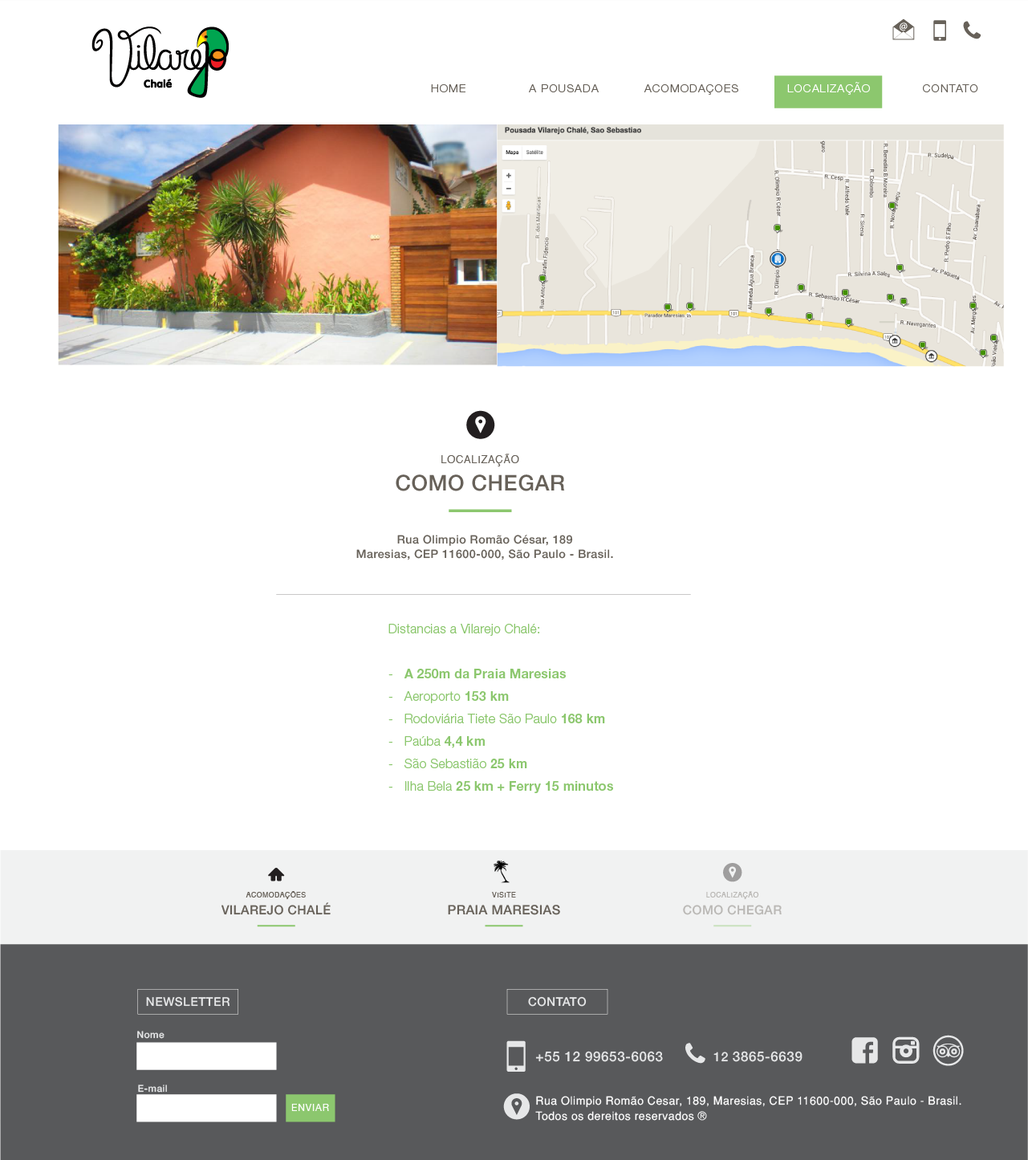
<style>
.page{position:relative;width:1028px;height:1160px;background:#ffffff}
.page>*{position:absolute;margin:0}
.t1{font:11.2px "HelveticaNeueLTStd-Lt";letter-spacing:0.075em;color:#676159}
.t2{font:11.2px "HelveticaNeueLTStd-Lt";letter-spacing:0.075em;color:#ffffff}
.t3{font:10.4px "Helvetica";letter-spacing:0.05em;color:#676159}
.t4{font:21.6px "Helvetica65-Medium";letter-spacing:0.025em;color:#676159}
.t5{font:11.5px "Helvetica65-Medium";letter-spacing:0.035em;color:#676159}
.t6{font:12.8px/22.5px "HelveticaNeueLTStd-Lt";letter-spacing:0.011em;color:#8cc76e}
.t7{font:12.8px/22.5px "HelveticaNeueLTStd-Bd";letter-spacing:0.011em;color:#8cc76e}
.t8{font:7px "Helvetica";letter-spacing:0.05em;color:#676159}
.t9{font:7px "Helvetica";letter-spacing:0.05em;color:#bab8b5}
.t10{font:12.6px "Helvetica65-Medium";letter-spacing:0.025em;color:#676159}
.t11{font:13px "Helvetica65-Medium";letter-spacing:0.025em;color:#676159}
.t12{font:12.6px "Helvetica65-Medium";letter-spacing:0.025em;color:#bab8b5}
.t13{font:12px "Helvetica65-Medium";letter-spacing:0.035em;color:#e6e7e8}
.t14{font:9.6px "Helvetica65-Medium";letter-spacing:0.035em;color:#e6e7e8}
.t15{font:13.6px "Helvetica65-Medium";letter-spacing:0.035em;color:#e6e7e8}
.t16{font:12.8px "Helvetica65-Medium";letter-spacing:0.035em;color:#e6e7e8}
.t17{font:11.2px/15.2px "Helvetica-Normal";letter-spacing:0.037em;color:#ffffff}
.t18{font:9.6px "HelveticaNeue";letter-spacing:0.075em;color:#ffffff}
</style>
<div class="page">
<p class="t1" style="left:431px;top:84px;width:35px;height:8px">HOME</p>
<p class="t1" style="left:529px;top:84px;width:70px;height:8px">A POUSADA</p>
<p class="t1" style="left:644px;top:84px;width:94px;height:11px">ACOMODAÇOES</p>
<p class="t2" style="left:787px;top:82px;width:83px;height:13px">LOCALIZAÇÃO</p>
<p class="t1" style="left:923px;top:84px;width:55px;height:8px">CONTATO</p>
<p class="t3" style="left:441px;top:453px;width:78px;height:13px">LOCALIZAÇÃO</p>
<p class="t4" style="left:396px;top:474px;width:169px;height:17px">COMO CHEGAR</p>
<p class="t5" style="left:356px;top:535px;width:257px;height:25px;text-align:center">Rua Olimpio Romão César, 189<br>Maresias, CEP 11600-000, São Paulo - Brasil.</p>
<p class="t6" style="left:388px;top:624px;width:225px;height:169px">Distancias a Vilarejo Chalé: <br><br>-   <span class="t7">A 250m da Praia Maresias<br></span>-   Aeroporto <span class="t7">153 km<br></span>-   Rodoviária Tiete São Paulo <span class="t7">168 km<br></span>-   Paúba <span class="t7">4,4 km<br></span>-   São Sebastião <span class="t7">25 km<br></span>-   Ilha Bela<span class="t7"> 25 km + Ferry 15 minutos</span></p>
<p class="t8" style="left:246px;top:891px;width:60px;height:8px">ACOMODAÇÕES</p>
<p class="t8" style="left:492px;top:892px;width:24px;height:5px">VISITE</p>
<p class="t9" style="left:706px;top:891px;width:53px;height:8px">LOCALIZAÇÃO</p>
<p class="t10" style="left:222px;top:902px;width:109px;height:13px">VILAREJO CHALÉ</p>
<p class="t11" style="left:448px;top:905px;width:112px;height:10px">PRAIA MARESIAS</p>
<p class="t12" style="left:683px;top:905px;width:99px;height:10px">COMO CHEGAR</p>
<p class="t13" style="left:146px;top:996px;width:84px;height:10px">NEWSLETTER</p>
<p class="t13" style="left:528px;top:996px;width:59px;height:10px">CONTATO</p>
<p class="t14" style="left:137px;top:1031px;width:28px;height:8px">Nome</p>
<p class="t15" style="left:535px;top:1051px;width:128px;height:11px">+55 12 99653-6063</p>
<p class="t15" style="left:714px;top:1051px;width:89px;height:11px"><span class="t16">12 </span>3865-6639</p>
<p class="t14" style="left:138px;top:1084px;width:29px;height:8px">E-mail</p>
<p class="t17" style="left:535px;top:1096px;width:427px;height:24px">Rua Olimpio Romão Cesar, 189, Maresias, CEP 11600-000, São Paulo - Brasil.<br>Todos os dereitos reservados ®</p>
<p class="t18" style="left:291px;top:1104px;width:38px;height:7px">ENVIAR</p>
</div>
